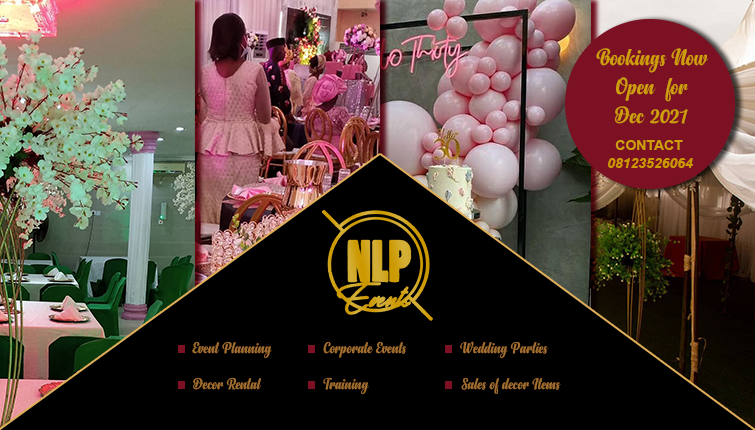
<style>
.page{position:relative;width:755px;height:430px;background:#000000}
.page>*{position:absolute;margin:0}
.t1{font:24px "Anydore";color:#ce9e0d}
.t2{font:14px "Arial-BoldMT";color:#ce9e0d}
.t3{font:14px "Arial-BoldItalicMT";color:#cc9901}
.t4{font:16px "Anydore";color:#a36f31}
</style>
<div class="page">
<p class="t1" style="left:596px;top:48px;width:113px;height:76px;text-align:center">Bookings Now<br>Open  for<br>Dec 2021</p>
<p class="t2" style="left:615px;top:140px;width:68px;height:10px">CONTACT</p>
<p class="t3" style="left:608px;top:158px;width:85px;height:10px">08123526064</p>
<p class="t4" style="left:192px;top:341px;width:80px;height:18px">Event Planning</p>
<p class="t4" style="left:323px;top:341px;width:85px;height:17px">Corporate Events</p>
<p class="t4" style="left:460px;top:341px;width:89px;height:18px">Wedding Parties</p>
<p class="t4" style="left:193px;top:377px;width:68px;height:13px">Decor Rental</p>
<p class="t4" style="left:323px;top:377px;width:46px;height:18px">Training</p>
<p class="t4" style="left:461px;top:377px;width:100px;height:17px">Sales of decor Items</p>
</div>
